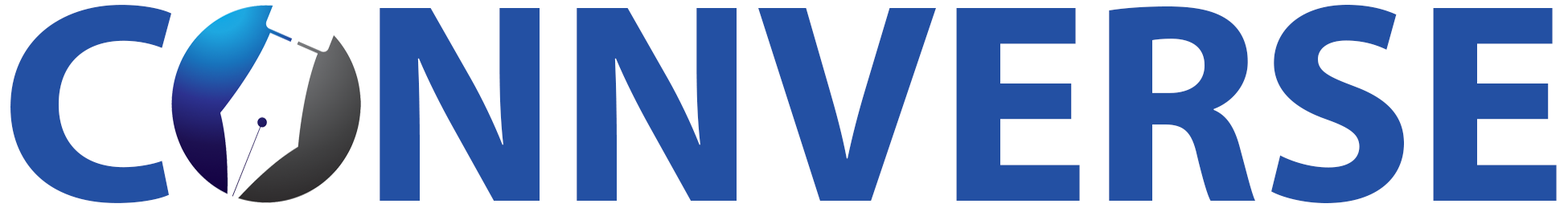
<style>
.page{position:relative;width:1568px;height:220px;background:#ffffff}
.page>*{position:absolute;margin:0}
.t1{font:286.2px "MyriadPro-Bold";color:#2350a3;scale:1.05 1}
.t2{font:286.2px "MyriadPro-Bold";color:#2350a3}
</style>
<div class="page">
<p class="t1" style="left:10px;top:5px;width:162px;height:198px">C</p>
<p class="t2" style="left:380px;top:5px;width:1177px;height:198px">NNVERSE</p>
</div>
